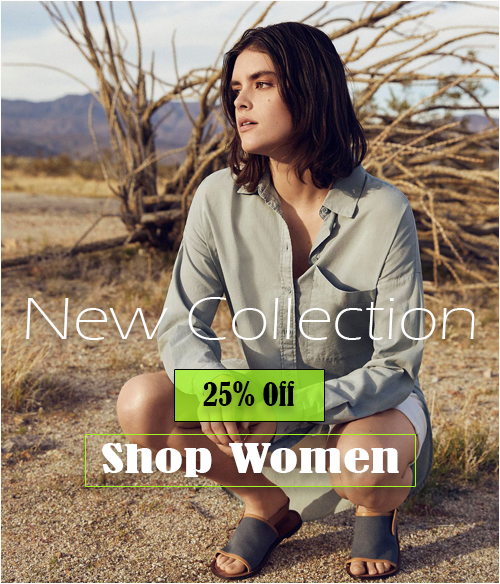
<style>
.page{position:relative;width:500px;height:584px}
.page>*{position:absolute;margin:0}
.t1{font:61.9px "ErasITC-Light";color:#ffffff;scale:1.16 1}
.t2{font:30px "BernardMT-Condensed";color:#000000}
.t3{font:37.4px "BernardMT-Condensed";color:#ffffff;scale:1.63 1}
</style>
<div class="page">
<p class="t1" style="left:26px;top:297px;width:449px;height:43px">New Collection</p>
<p class="t2" style="left:203px;top:381px;width:92px;height:25px">25% Off</p>
<p class="t3" style="left:102px;top:443px;width:297px;height:34px">Shop Women</p>
</div>
